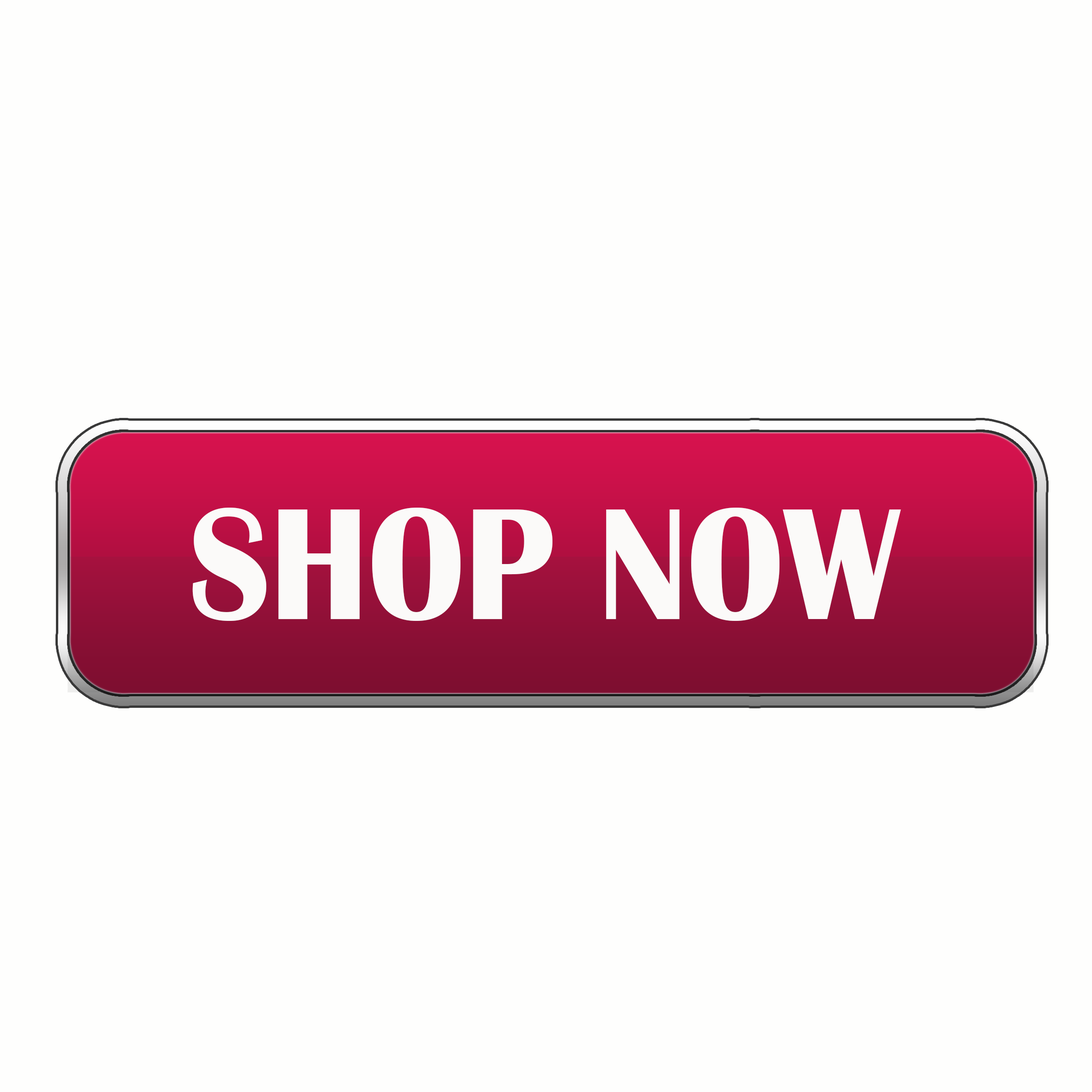
<style>
.page{position:relative;width:1092px;height:1092px;background:#fefefd}
.page>*{position:absolute;margin:0}
.t1{font:164.7px "BritannicBold";color:#fbfaf9;scale:0.9 1}
</style>
<div class="page">
<p class="t1" style="left:192px;top:508px;width:709px;height:113px">SHOP NOW</p>
</div>
